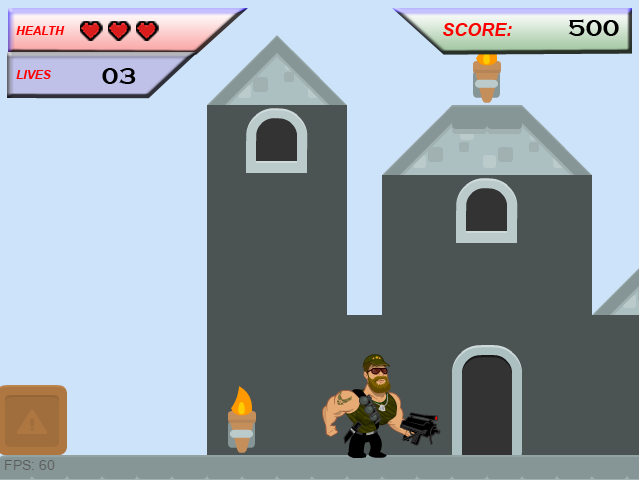
<style>
.page{position:relative;width:640px;height:480px;background:#cce3f9}
.page>*{position:absolute;margin:0}
.t1{font:12px "Arial-BoldItalicMT";color:#ff0000}
.t2{font:18px "Arial-BoldItalicMT";color:#ff0000}
.t3{font:24px "CopperplateGothic-Bold";color:#000000}
</style>
<div class="page">
<p class="t1" style="left:16px;top:26px;width:49px;height:9px">HEALTH</p>
<p class="t2" style="left:443px;top:23px;width:69px;height:13px">SCORE:</p>
<p class="t3" style="left:568px;top:19px;width:51px;height:17px">500</p>
<p class="t1" style="left:16px;top:70px;width:35px;height:9px">LIVES</p>
<p class="t3" style="left:102px;top:68px;width:34px;height:16px">03</p>
</div>
